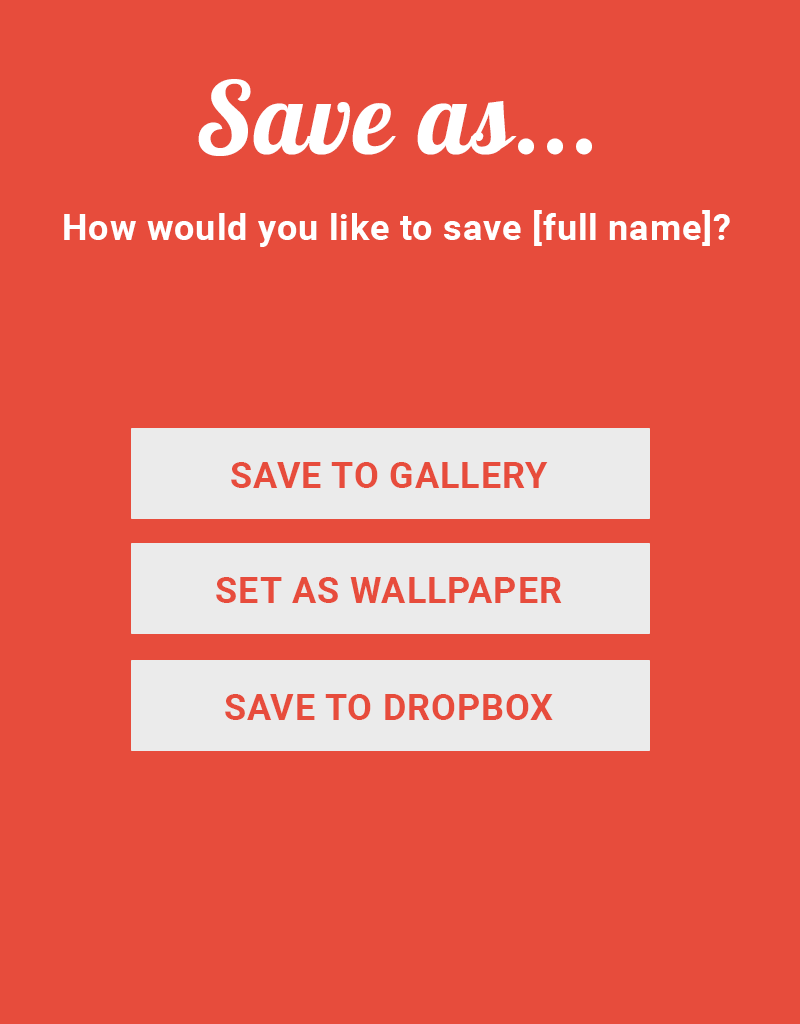
<style>
.page{position:relative;width:800px;height:1024px;background:#e74c3c}
.page>*{position:absolute;margin:0}
.t1{font:100px "Lobster";letter-spacing:0.025em;color:#ffffff}
.t2{font:36px "Roboto-Bold";letter-spacing:0.025em;color:#ffffff}
.t3{font:36px "Roboto-Bold";letter-spacing:0.025em;color:#e74c3c}
</style>
<div class="page">
<p class="t1" style="left:198px;top:79px;width:394px;height:77px">Save as...</p>
<p class="t2" style="left:64px;top:210px;width:666px;height:37px">How would you like to save [full name]?</p>
<p class="t3" style="left:231px;top:462px;width:317px;height:26px">SAVE TO GALLERY</p>
<p class="t3" style="left:216px;top:577px;width:346px;height:26px">SET AS WALLPAPER</p>
<p class="t3" style="left:225px;top:694px;width:328px;height:26px">SAVE TO DROPBOX</p>
</div>
